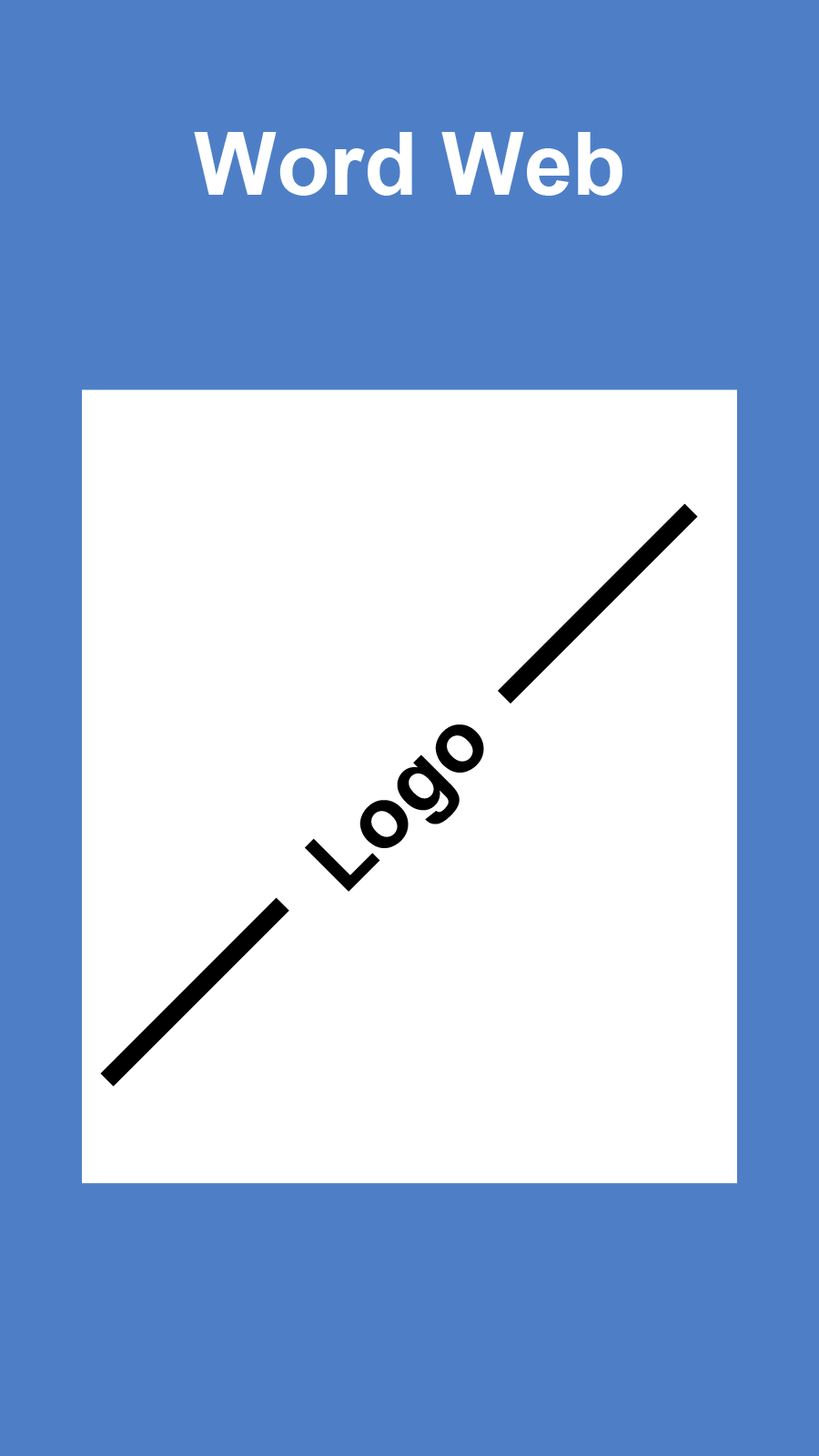
<style>
.page{position:relative;width:819px;height:1456px;background:#4e7fc6}
.page>*{position:absolute;margin:0}
.t1{font:87.4px "Arial-BoldMT";color:#ffffff}
.t2{font:87.4px "Arial-BoldMT";color:#000000}
.t3{font:87.4px "Arial-BoldMT";color:#4e7fc6}
</style>
<div class="page">
<p class="t1" style="left:194px;top:132px;width:428px;height:64px">Word Web</p>
<p class="t2" style="left:305px;top:724px;width:179px;height:168px;rotate:-45deg"><span class="t3"><br><br><br></span>Logo</p>
</div>
